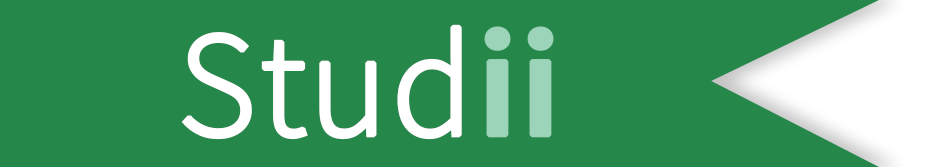
<style>
.page{position:relative;width:936px;height:167px;background:#26874b}
.page>*{position:absolute;margin:0}
.t1{font:150.3px "SourceSansPro-Light";color:#ffffff;font-weight:bold}
.t2{font:150.3px "SourceSansPro-Semibold";color:#9bd4b8;font-weight:bold}
</style>
<div class="page">
<p class="t1" style="left:181px;top:24px;width:373px;height:116px">Stud<span class="t2">ii</span></p>
</div>
